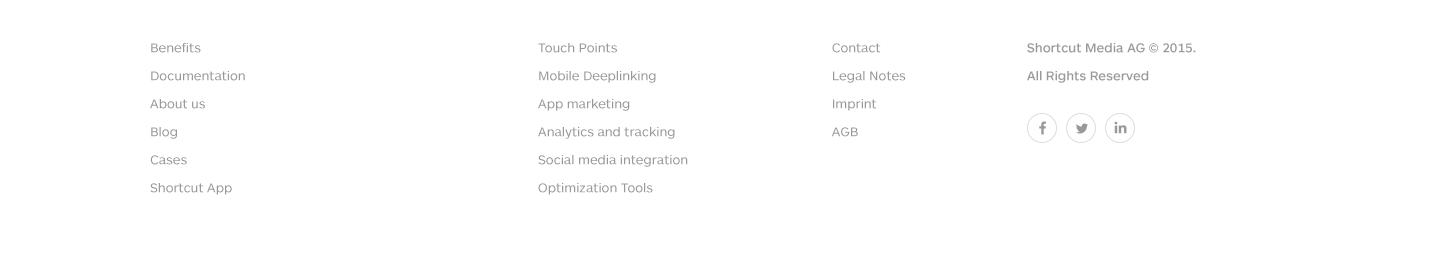
<style>
.page{position:relative;width:1440px;height:261px;background:#ffffff}
.page>*{position:absolute;margin:0}
.t1{font:13px/28px "ARSMaquettePro-Regular";color:#999999}
.t2{font:13px/28px "ARSMaquettePro-Medium";color:#999999}
</style>
<div class="page">
<p class="t1" style="left:150px;top:42px;width:95px;height:153px">Benefits<br>Documentation <br>About us<br>Blog<br>Cases <br>Shortcut App</p>
<p class="t1" style="left:538px;top:43px;width:150px;height:152px">Touch Points<br>Mobile Deeplinking<br>App marketing <br>Analytics and tracking <br>Social media integration <br>Optimization Tools</p>
<p class="t1" style="left:831px;top:43px;width:75px;height:94px">Contact     <br>Legal Notes<br>Imprint<br>AGB</p>
<p class="t2" style="left:1027px;top:43px;width:169px;height:40px">Shortcut Media AG © 2015. <br>All Rights Reserved</p>
</div>
